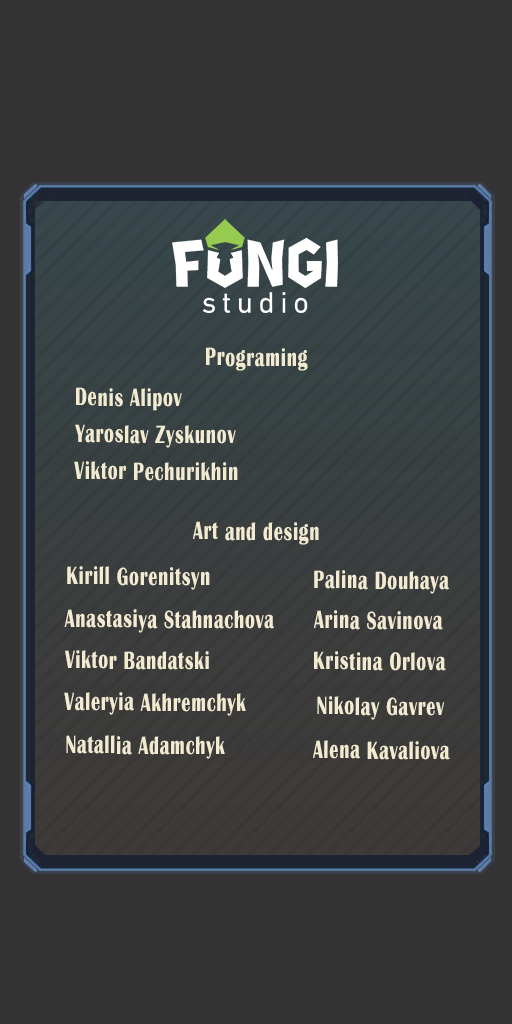
<style>
.page{position:relative;width:512px;height:1024px;background:#333333}
.page>*{position:absolute;margin:0}
.t1{font:26px "BritannicBold";letter-spacing:0.049em;color:#f2ebd2;scale:0.69 1}
</style>
<div class="page">
<p class="t1" style="left:206px;top:347px;width:102px;height:24px">Programing</p>
<p class="t1" style="left:76px;top:387px;width:106px;height:24px">Denis Alipov</p>
<p class="t1" style="left:75px;top:424px;width:161px;height:24px">Yaroslav Zyskunov</p>
<p class="t1" style="left:74px;top:461px;width:164px;height:20px">Viktor Pechurikhin</p>
<p class="t1" style="left:193px;top:521px;width:126px;height:24px">Art and design</p>
<p class="t1" style="left:67px;top:566px;width:143px;height:24px">Kirill Gorenitsyn</p>
<p class="t1" style="left:314px;top:570px;width:135px;height:24px">Palina Douhaya</p>
<p class="t1" style="left:64px;top:609px;width:210px;height:24px">Anastasiya Stahnachova</p>
<p class="t1" style="left:314px;top:610px;width:129px;height:20px">Arina Savinova</p>
<p class="t1" style="left:65px;top:650px;width:144px;height:20px">Viktor Bandatski</p>
<p class="t1" style="left:314px;top:651px;width:132px;height:20px">Kristina Orlova</p>
<p class="t1" style="left:64px;top:692px;width:182px;height:24px">Valeryia Akhremchyk</p>
<p class="t1" style="left:317px;top:696px;width:128px;height:24px">Nikolay Gavrev</p>
<p class="t1" style="left:66px;top:735px;width:159px;height:24px">Natallia Adamchyk</p>
<p class="t1" style="left:313px;top:740px;width:137px;height:20px">Alena Kavaliova</p>
</div>
